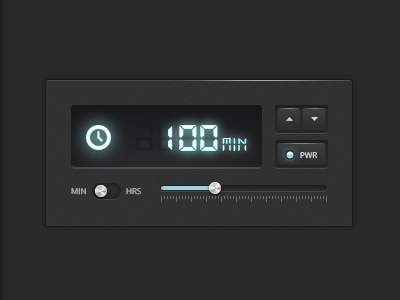
<style>
.page{position:relative;width:400px;height:300px;background:#282828}
.page>*{position:absolute;margin:0}
.t1{font:41.2px "DS-Digital";color:#1a1a1c;scale:1.04 1}
.t2{font:41.2px "DS-Digital";scale:1.04 1}
.t3{font:41.2px "DS-Digital-Bold";scale:1.04 1}
.t4{font:20px "DS-Digital";color:#cffefe}
.t5{font:8px "OpenSans";color:#d6d6d6}
.t6{font:8px "OpenSans";color:#b4b4b5;text-transform:uppercase}
</style>
<div class="page">
<p class="t1" style="left:136px;top:125px;width:17px;height:26px;opacity:0.56">8</p>
<p class="t2" style="left:158px;top:125px;width:17px;height:26px">8</p>
<p class="t3" style="left:168px;top:125px;width:50px;height:26px">100</p>
<p class="t2" style="left:178px;top:125px;width:17px;height:26px">8</p>
<p class="t2" style="left:200px;top:125px;width:17px;height:26px">8</p>
<p class="t4" style="left:222px;top:137px;width:25px;height:14px">MIN</p>
<p class="t5" style="left:300px;top:152px;width:18px;height:7px">PWR</p>
<p class="t6" style="left:71px;top:188px;width:15px;height:7px">MIN</p>
<p class="t6" style="left:126px;top:188px;width:15px;height:7px">HRS</p>
</div>
